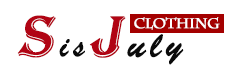
<style>
.page{position:relative;width:230px;height:70px;background:#ffffff}
.page>*{position:absolute;margin:0}
.t1{font:36px "BrushScriptStd";letter-spacing:0.11em;color:#0a0a0a;font-weight:bold}
.t2{font:60px "Algerian";letter-spacing:0.11em;color:#b10414;font-weight:bold;font-style:italic}
.t3{font:36px "BrushScriptMT";letter-spacing:0.11em;color:#0a0a0a;font-weight:bold}
.t4{font:14px "CharlemagneStd-Bold";letter-spacing:-0.05em;color:#ffffff;font-weight:bold}
</style>
<div class="page">
<p class="t1" style="left:17px;top:15px;width:167px;height:50px"><span class="t2">S</span><span class="t3">is</span><span class="t2">J</span>uly</p>
<p class="t4" style="left:134px;top:17px;width:86px;height:13px">Clothing</p>
</div>
